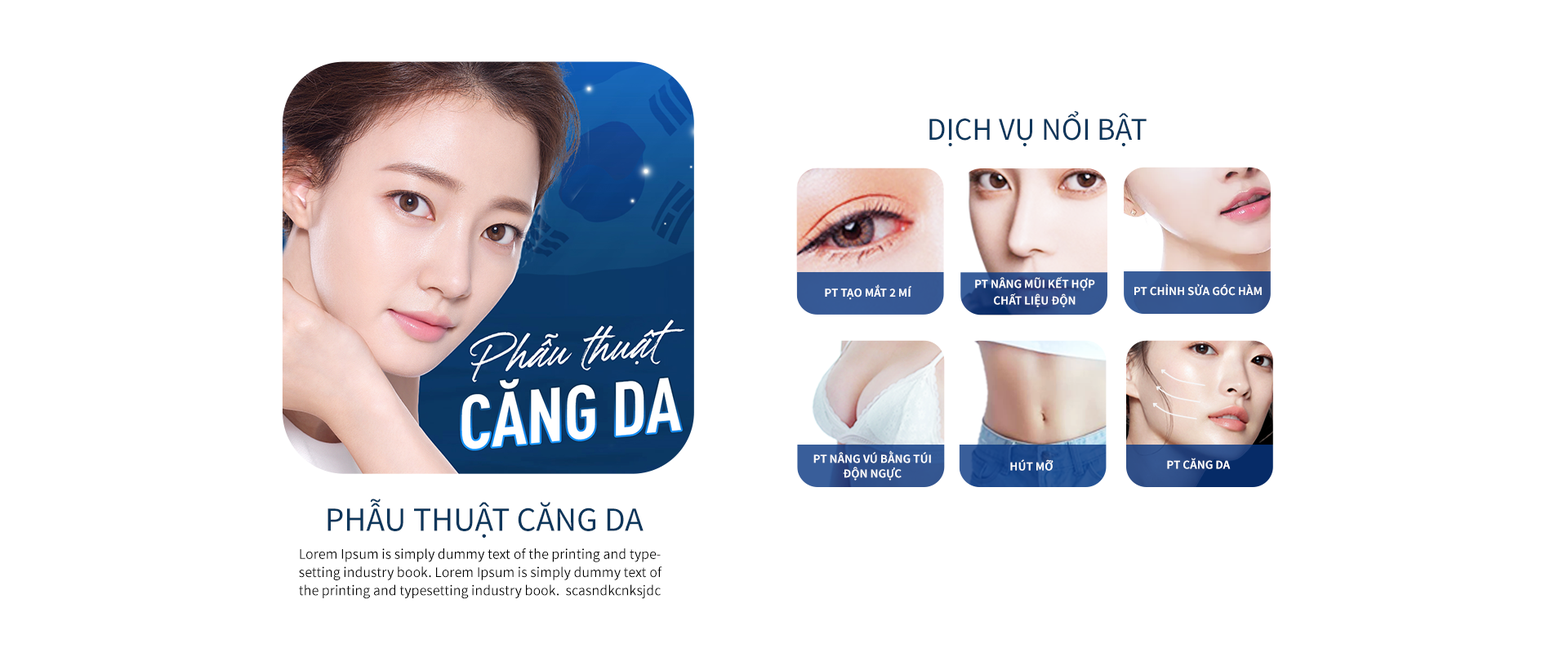
<style>
.page{position:relative;width:1568px;height:653px;background:#ffffff}
.page>*{position:absolute;margin:0}
.t1{font:28.3px "NotoSansKR-Regular";color:#0b365b}
.t2{font:10.9px/16.5px "NotoSansKR-Bold";color:#ffffff;text-transform:uppercase}
.t3{font:10.9px "NotoSansKR-Bold";color:#ffffff;text-transform:uppercase}
.t4{font:10.9px/14.8px "NotoSansKR-Bold";color:#ffffff;text-transform:uppercase}
.t5{font:30.5px "NotoSansKR-Regular";color:#0b365b;text-transform:uppercase}
.t6{font:13.1px/18.2px "NotoSansKR-Regular";color:#000000}
</style>
<div class="page">
<p class="t1" style="left:929px;top:111px;width:218px;height:35px">DỊCH VỤ NỔI BẬT</p>
<p class="t2" style="left:975px;top:276px;width:120px;height:31px;text-align:center">PT nâng mũi kết hợp chất liệu độn</p>
<p class="t3" style="left:825px;top:284px;width:86px;height:16px">PT tạo mắt 2 mí</p>
<p class="t3" style="left:1134px;top:283px;width:128px;height:13px">PT chỉnh sửa góc hàm</p>
<p class="t4" style="left:813px;top:450px;width:118px;height:30px;text-align:center">PT nâng vú bằng túi độn ngực</p>
<p class="t3" style="left:1010px;top:459px;width:44px;height:11px">Hút mỡ</p>
<p class="t3" style="left:1167px;top:457px;width:64px;height:12px">pt căng da</p>
<p class="t5" style="left:327px;top:498px;width:317px;height:39px">phẫu thuật căng da</p>
<p class="t6" style="left:299px;top:548px;width:363px;height:51px">Lorem Ipsum is simply dummy text of the printing and typesetting industry book. Lorem Ipsum is simply dummy text of the printing and typesetting industry book.  scasndkcnksjdc</p>
</div>
